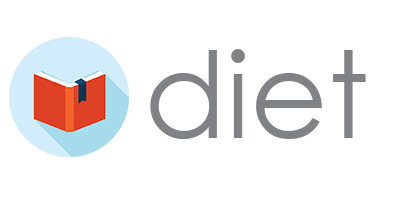
<style>
.page{position:relative;width:400px;height:200px;background:#ffffff}
.page>*{position:absolute;margin:0}
.t1{font:120px "CenturyGothic";color:#7f8386}
</style>
<div class="page">
<p class="t1" style="left:150px;top:49px;width:216px;height:90px">diet</p>
</div>
